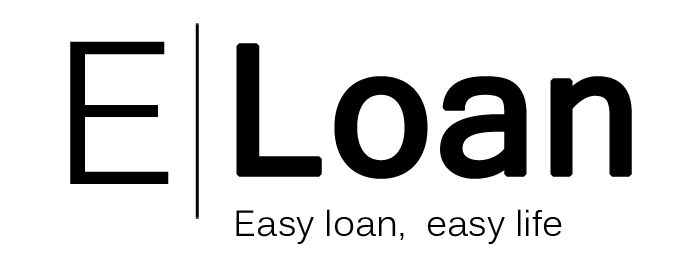
<style>
.page{position:relative;width:697px;height:274px;background:#ffffff}
.page>*{position:absolute;margin:0}
.t1{font:200px "Kalinga";color:#000000}
.t2{font:200px "Vrinda";color:#000000;font-weight:bold}
.t3{font:36px "Kalinga";color:#000000}
</style>
<div class="page">
<p class="t1" style="left:70px;top:41px;width:99px;height:143px">E</p>
<p class="t2" style="left:236px;top:43px;width:396px;height:136px">Loan</p>
<p class="t3" style="left:236px;top:209px;width:326px;height:35px">Easy loan,  easy life</p>
</div>
